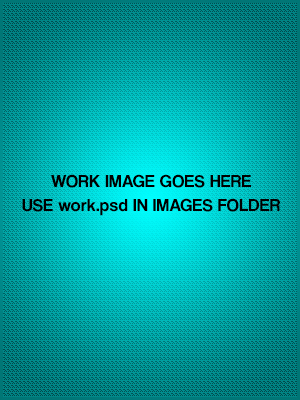
<style>
.page{position:relative;width:300px;height:400px}
.page>*{position:absolute;margin:0}
.t1{font:18px/24px "CoolveticaRg-Regular";letter-spacing:0.025em;color:#000000}
</style>
<div class="page">
<p class="t1" style="left:22px;top:174px;width:258px;height:42px;text-align:center">WORK IMAGE GOES HERE<br>USE work.psd IN IMAGES FOLDER</p>
</div>
